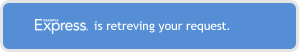
<style>
.page{position:relative;width:299px;height:52px;background:#558ed5}
.page>*{position:absolute;margin:0}
.t1{font:12px "TrebuchetMS";color:#ffffff}
</style>
<div class="page">
<p class="t1" style="left:94px;top:21px;width:136px;height:12px">is retreving your request.</p>
</div>
